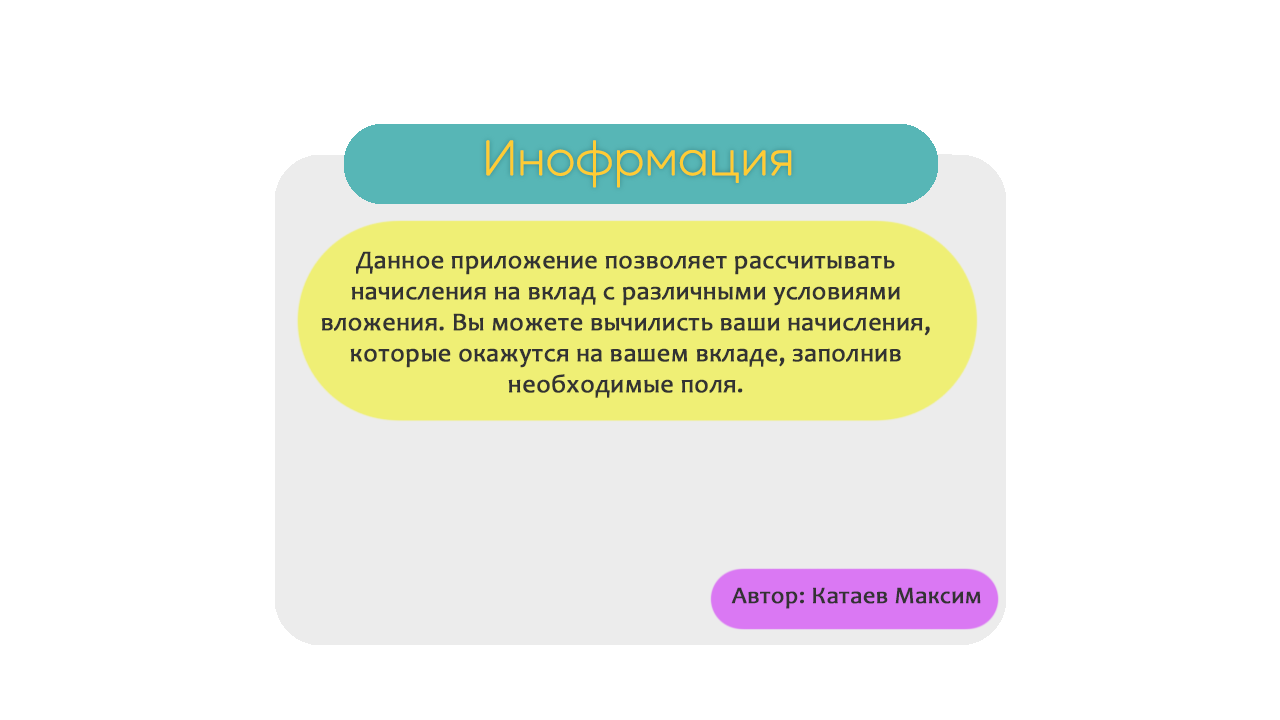
<style>
.page{position:relative;width:1280px;height:720px;background:#ffffff}
.page>*{position:absolute;margin:0}
.t1{font:48px "OktaNeue-UltraLight";color:#ffcc33;font-weight:bold}
.t2{font:25.8px "Candara";color:#333333;font-weight:bold}
.t3{font:24px "Candara";color:#333333;font-weight:bold}
</style>
<div class="page">
<p class="t1" style="left:486px;top:140px;width:306px;height:48px">Инофрмация</p>
<p class="t2" style="left:321px;top:251px;width:609px;height:147px;text-align:center">Данное приложение позволяет расcчитывать<br>начисления на вклад с различными условиями<br>вложения. Вы можете вычилисть ваши начисления,<br>которые окажутся на вашем вкладе, заполнив<br>необходимые поля.</p>
<p class="t3" style="left:731px;top:587px;width:250px;height:22px">Автор: Катаев Максим</p>
</div>
